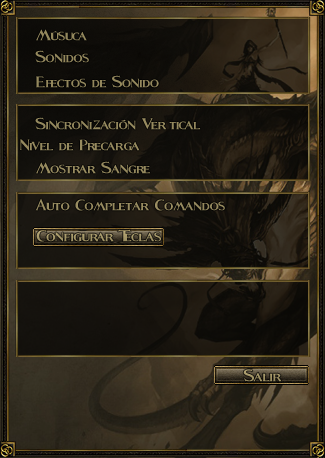
<style>
.page{position:relative;width:325px;height:458px}
.page>*{position:absolute;margin:0}
.t1{font:29.3px "Fleet-Street";color:#94885d}
.t2{font:29.3px "Fleet-Street";color:#95895e}
.t3{font:29.3px "Fleet-Street";color:#968a5e}
.t4{font:29.3px "Fleet-Street";color:#988c60}
.t5{font:30px "Fleet-Street";color:#a69769}
.t6{font:30px "Fleet-Street";color:#a29466}
</style>
<div class="page">
<p class="t1" style="left:36px;top:29px;width:51px;height:12px">Músuca</p>
<p class="t1" style="left:35px;top:50px;width:54px;height:13px">Sonidos</p>
<p class="t1" style="left:36px;top:75px;width:123px;height:13px">Efectos de Sonido</p>
<p class="t2" style="left:35px;top:117px;width:166px;height:13px">Sincronización Vertical</p>
<p class="t3" style="left:20px;top:139px;width:120px;height:12px">Nivel de Precarga</p>
<p class="t4" style="left:36px;top:161px;width:115px;height:13px">Mostrar Sangre</p>
<p class="t4" style="left:35px;top:198px;width:190px;height:13px">Auto Completar Comandos</p>
<p class="t5" style="left:36px;top:229px;width:125px;height:13px">Configurar Teclas</p>
<p class="t6" style="left:243px;top:369px;width:39px;height:13px">Salir</p>
</div>
